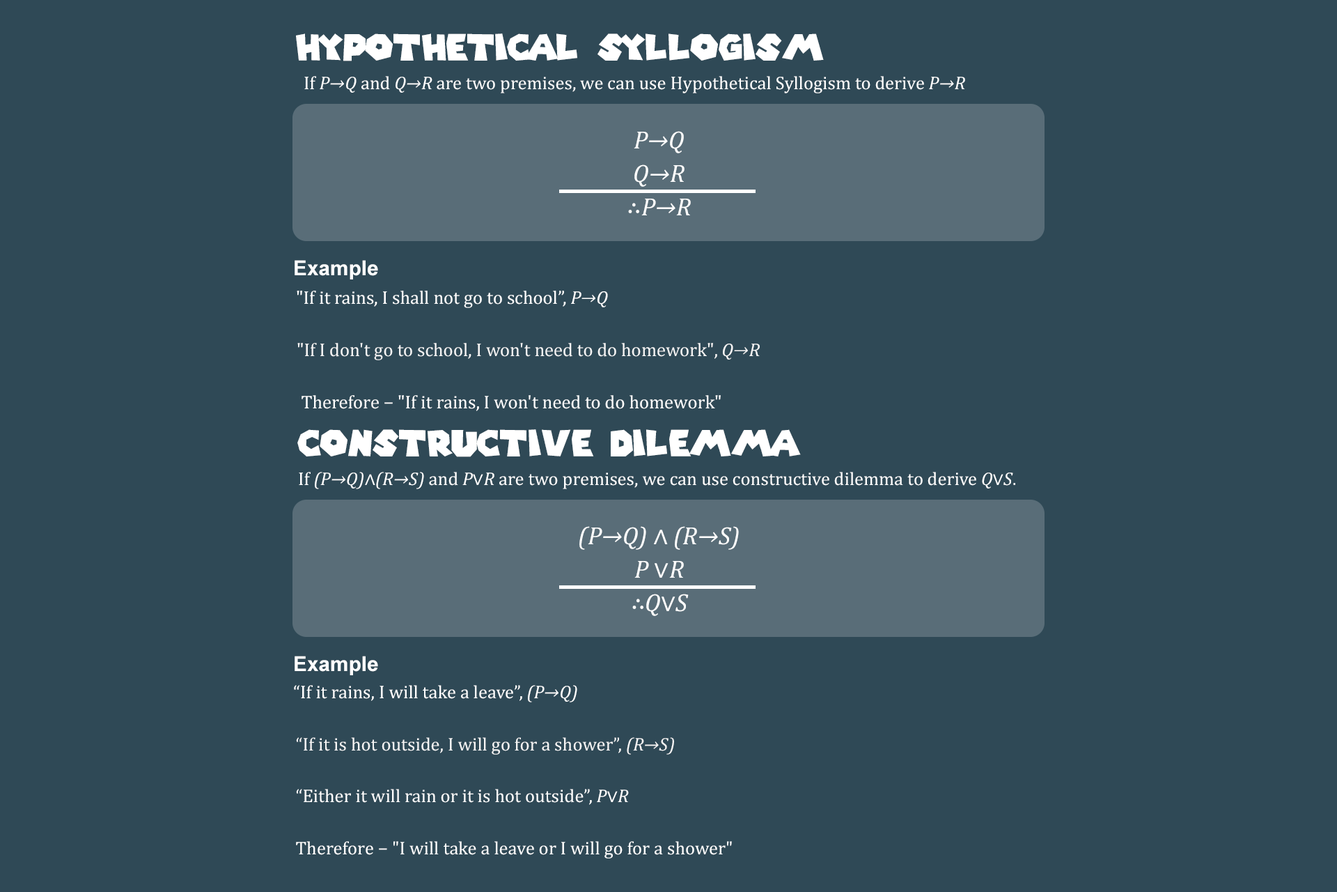
<style>
.page{position:relative;width:1337px;height:892px;background:#2f4956}
.page>*{position:absolute;margin:0}
.t1{font:35.9px "SuperMarioGalaxy";color:#ffffff}
.t2{font:18.5px "Cambria";color:#ffffff}
.t3{font:18.5px "Cambria-Italic";color:#ffffff}
.t4{font:25.1px/33.4px "Cambria-Italic";color:#ffffff}
.t5{font:25.1px/33.4px "Cambria";color:#ffffff}
.t6{font:20.8px "Arial-BoldMT";color:#ffffff}
.t7{font:18.6px "Cambria";color:#ffffff}
.t8{font:18.6px "Cambria-Italic";color:#ffffff}
.t9{font:18.6px "Cambria";color:#f5f5f5}
.t10{font:18.6px "Cambria-Italic";color:#f5f5f5}
.t11{font:18.5px "Cambria";color:#f5f5f5}
.t12{font:18.5px "Cambria-Italic";color:#f5f5f5}
</style>
<div class="page">
<p class="t1" style="left:296px;top:33px;width:528px;height:28px">Hypothetical Syllogism</p>
<p class="t2" style="left:304px;top:76px;width:661px;height:17px">If <span class="t3">P→Q</span> and <span class="t3">Q→R</span> are two premises, we can use Hypothetical Syllogism to derive <span class="t3">P→R</span></p>
<p class="t4" style="left:628px;top:131px;width:63px;height:84px;text-align:center">P→Q<br>Q→R<br><span class="t5">∴</span>P→R</p>
<p class="t6" style="left:295px;top:260px;width:83px;height:19px">Example</p>
<p class="t7" style="left:297px;top:290px;width:311px;height:18px">"If it rains, I shall not go to school”, <span class="t8">P→Q</span></p>
<p class="t9" style="left:297px;top:343px;width:463px;height:17px">"If I don't go to school, I won't need to do homework", <span class="t10">Q→R</span></p>
<p class="t7" style="left:302px;top:395px;width:419px;height:16px">Therefore − "If it rains, I won't need to do homework"</p>
<p class="t1" style="left:297px;top:429px;width:504px;height:28px">Constructive Dilemma</p>
<p class="t2" style="left:299px;top:472px;width:717px;height:17px">If <span class="t3">(P→Q)</span>∧<span class="t3">(R→S)</span> and <span class="t3">P</span>∨<span class="t3">R </span>are two premises, we can use constructive dilemma to derive <span class="t3">Q</span>∨<span class="t3">S</span>.</p>
<p class="t4" style="left:580px;top:526px;width:159px;height:90px;text-align:center">(P→Q) <span class="t5">∧ </span>(R→S)<br>P <span class="t5">∨</span>R<br><span class="t5">∴</span>Q<span class="t5">∨</span>S</p>
<p class="t6" style="left:295px;top:655px;width:83px;height:20px">Example</p>
<p class="t2" style="left:294px;top:685px;width:283px;height:17px">“If it rains, I will take a leave”, <span class="t3">(P→Q)</span></p>
<p class="t11" style="left:296px;top:737px;width:378px;height:17px">“If it is hot outside, I will go for a shower”, <span class="t12">(R→S)</span></p>
<p class="t2" style="left:296px;top:789px;width:333px;height:16px">“Either it will rain or it is hot outside”, <span class="t3">P</span>∨<span class="t3">R</span></p>
<p class="t2" style="left:296px;top:841px;width:436px;height:17px">Therefore − "I will take a leave or I will go for a shower"</p>
</div>
